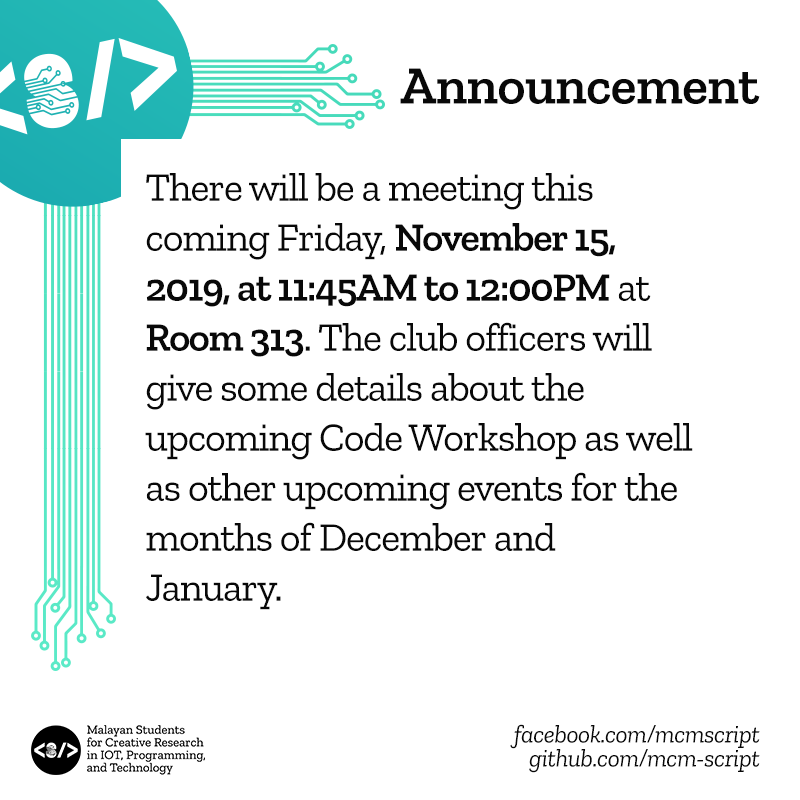
<style>
.page{position:relative;width:800px;height:800px;background:#ffffff}
.page>*{position:absolute;margin:0}
.t1{font:53.7px "ZillaSlab-SemiBold";letter-spacing:-0.01em;color:#080808}
.t2{font:40.3px/50px "ZillaSlab-Regular";letter-spacing:-0.03em;color:#080808}
.t3{font:40.3px/50px "ZillaSlab-SemiBold";letter-spacing:-0.03em;color:#080808}
.t4{font:25.2px/24px "ZillaSlab-Italic";letter-spacing:-0.02em;color:#080808}
</style>
<div class="page">
<p class="t1" style="left:400px;top:68px;width:360px;height:36px">Announcement</p>
<p class="t2" style="left:145px;top:173px;width:548px;height:437px">There will be a meeting this coming Friday, <span class="t3">November 15, 2019, at 11:45AM to 12:00PM</span> at <span class="t3">Room 313</span>. The club officers will give some details about the upcoming Code Workshop as well as other upcoming events for the months of December and January.</p>
<p class="t4" style="left:510px;top:724px;width:250px;height:49px;text-align:right">facebook.com/mcmscript<br>github.com/mcm-script</p>
</div>
